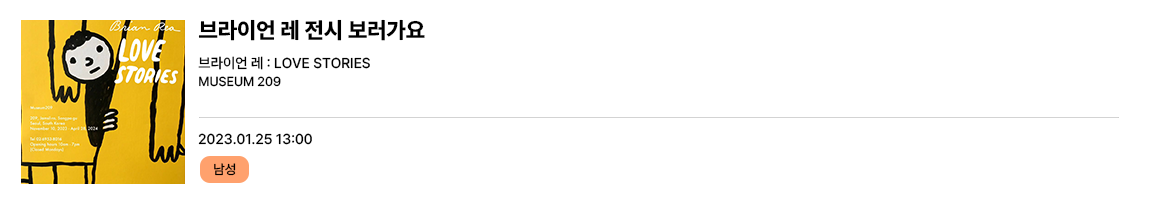
<style>
.page{position:relative;width:1150px;height:200px;background:#ffffff}
.page>*{position:absolute;margin:0}
.t1{font:22.3px "PretendardVariable-ExtraBold";color:#000000}
.t2{font:14.3px "PretendardVariable-Medium";color:#000000}
.t3{font:12.9px "PretendardVariable-Medium";color:#000000}
.t4{font:13.4px "PretendardVariable-Medium";color:#000000}
</style>
<div class="page">
<p class="t1" style="left:198px;top:19px;width:227px;height:22px">브라이언 레 전시 보러가요</p>
<p class="t2" style="left:198px;top:56px;width:172px;height:14px">브라이언 레 : LOVE STORIES</p>
<p class="t3" style="left:199px;top:76px;width:82px;height:11px">MUSEUM 209</p>
<p class="t2" style="left:198px;top:133px;width:114px;height:12px">2023.01.25 13:00</p>
<p class="t4" style="left:214px;top:163px;width:22px;height:13px">남성</p>
</div>
